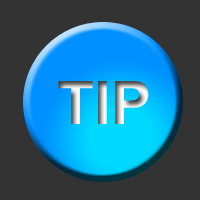
<style>
.page{position:relative;width:200px;height:200px;background:#333333}
.page>*{position:absolute;margin:0}
.t1{font:60px "Arial-BoldMT"}
</style>
<div class="page">
<p class="t1" style="left:58px;top:81px;width:91px;height:43px">TIP</p>
</div>
